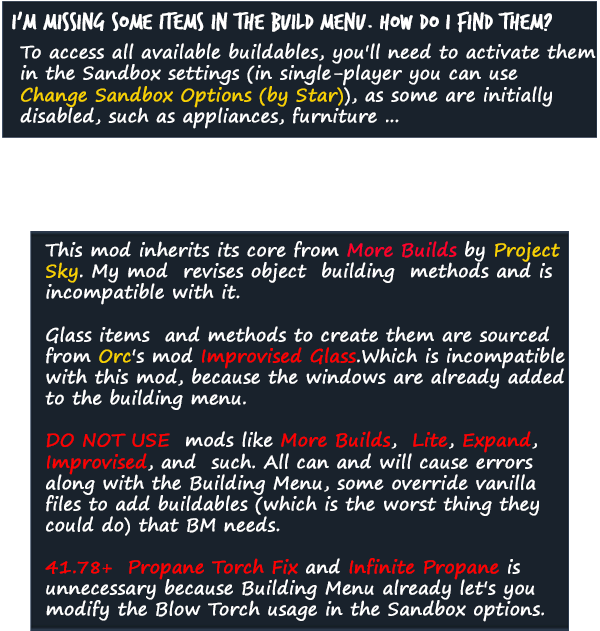
<style>
.page{position:relative;width:600px;height:631px;background:#19222c}
.page>*{position:absolute;margin:0}
.t1{font:24.4px "TrashHand";color:#ffffff;font-weight:bold}
.t2{font:17.6px "SegoePrint";color:#ffffff;font-weight:bold}
.t3{font:17.6px "SegoePrint";color:#f7d102;font-weight:bold}
.t4{font:17.6px "SegoePrint";color:#ff002a;font-weight:bold}
.t5{font:17.6px "SegoePrint";color:#ff0000;font-weight:bold}
</style>
<div class="page">
<p class="t1" style="left:12px;top:11px;width:540px;height:22px">I'm missing some items in the build menu. How do I find them?</p>
<p class="t2" style="left:20px;top:43px;width:576px;height:86px;text-align:justify">To access all available buildables, you'll need to activate them<br>in the Sandbox settings (in single-player you can use <br><span class="t3">Change Sandbox Options (by Star)</span>), as some are initially <br>disabled, such as appliances, furniture ...</p>
<p class="t2" style="left:45px;top:241px;width:520px;height:381px;text-align:justify">This mod inherits its core from <span class="t4">More Builds</span> by <span class="t3">Project <br>Sky</span>. My mod  revises object  building  methods and is <br>incompatible with it.<br><br>Glass items  and methods to create them are sourced <br>from <span class="t3">Orc</span>'s mod <span class="t5">Improvised Glass</span>.Which is incompatible <br>with this mod, because the windows are already added <br>to the building menu.<br><br><span class="t5">DO NOT USE</span>  mods like <span class="t5">More Builds</span>,  <span class="t5">Lite</span>, <span class="t5">Expand</span>, <br><span class="t5">Improvised</span>, and  such. All can and will cause errors <br>along with the Building Menu, some override vanilla <br>files to add buildables (which is the worst thing they <br>could do) that BM needs.<br><br><span class="t5">41.78+  Propane Torch Fix </span>and <span class="t5">Infinite Propane</span> is <br>unnecessary because Building Menu already let's you <br>modify the Blow Torch usage in the Sandbox options.</p>
</div>
